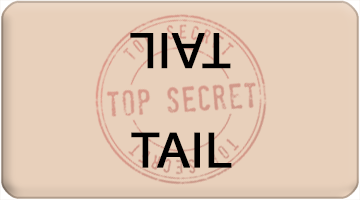
<style>
.page{position:relative;width:360px;height:200px;background:#e8d0bb}
.page>*{position:absolute;margin:0}
.t1{font:48px "ArialMT";color:#000000;font-weight:bold}
</style>
<div class="page">
<p class="t1" style="left:130px;top:33px;width:101px;height:36px;rotate:180deg">TAIL</p>
<p class="t1" style="left:131px;top:132px;width:101px;height:36px">TAIL</p>
</div>
